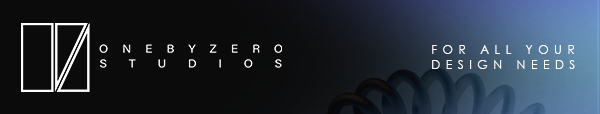
<style>
.page{position:relative;width:600px;height:114px;background:#0b0b0b}
.page>*{position:absolute;margin:0}
.t1{font:12px/14.3px "CenturyGothic";letter-spacing:0.46em;color:#fefefe}
</style>
<div class="page">
<p class="t1" style="left:432px;top:45px;width:143px;height:24px">FOR ALL YOUR <br>DESIGN NEEDS</p>
</div>
